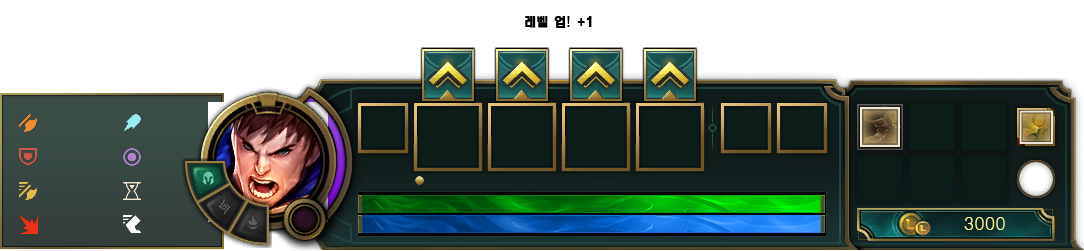
<style>
.page{position:relative;width:1084px;height:251px;background:#ffffff}
.page>*{position:absolute;margin:0}
.t1{font:12px "HeadlineR-HM";color:#000000}
.t2{font:18px "Dotum";color:#fff799}
</style>
<div class="page">
<p class="t1" style="left:525px;top:16px;width:67px;height:12px">레벨 업! +1</p>
<p class="t2" style="left:964px;top:217px;width:41px;height:13px">3000</p>
</div>
